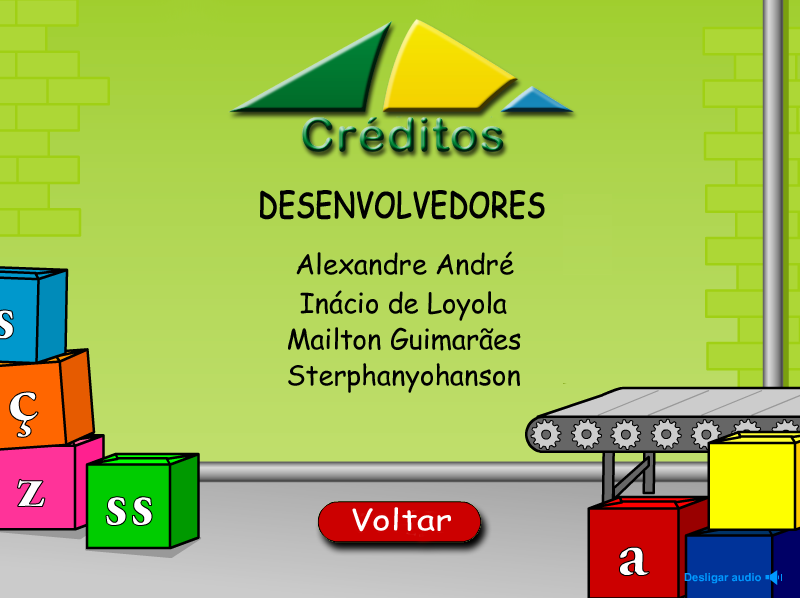
<style>
.page{position:relative;width:800px;height:598px}
.page>*{position:absolute;margin:0}
.t1{font:34.4px "ComicSansMS";color:#000000;font-weight:bold;scale:0.79 1}
.t2{font:27.8px "ComicSansMS";color:#000000}
.t3{font:29.1px "ComicSansMS";color:#ffffff;scale:1.21 1}
</style>
<div class="page">
<p class="t1" style="left:260px;top:190px;width:285px;height:30px">DESENVOLVEDORES</p>
<p class="t2" style="left:296px;top:251px;width:218px;height:24px">Alexandre André</p>
<p class="t2" style="left:300px;top:290px;width:207px;height:31px">Inácio de Loyola</p>
<p class="t2" style="left:288px;top:327px;width:233px;height:24px">Mailton Guimarães</p>
<p class="t2" style="left:288px;top:363px;width:232px;height:30px">Sterphanyohanson</p>
<p class="t3" style="left:352px;top:507px;width:99px;height:25px">Voltar</p>
</div>
